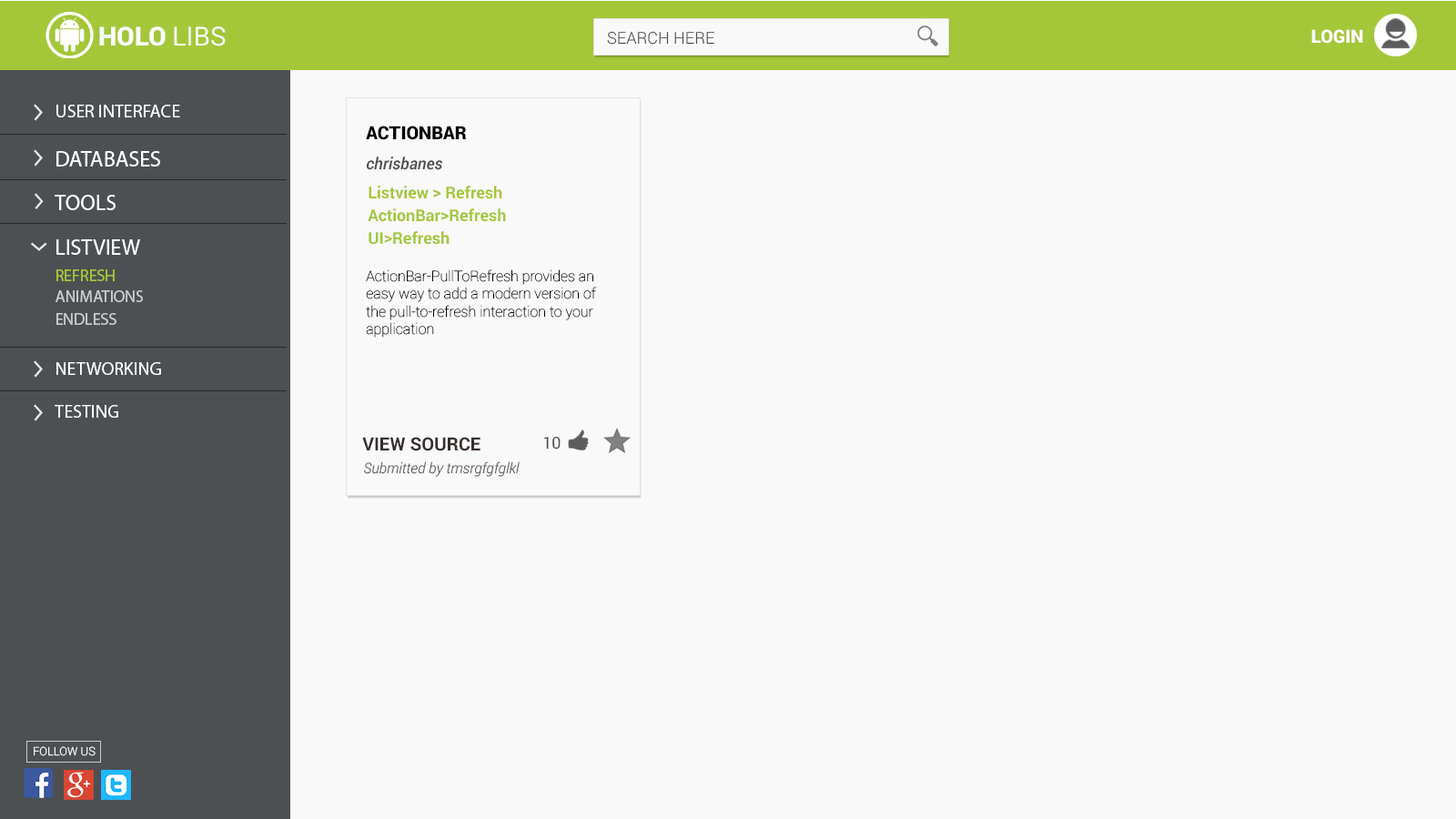
<style>
.page{position:relative;width:1456px;height:819px;background:#f9f9f9}
.page>*{position:absolute;margin:0}
.t1{font:26.1px "Roboto-Black";color:#f9f9f9}
.t2{font:26.1px "Roboto-Regular";color:#f9f9f9}
.t3{font:18.2px "Roboto-Black";color:#f9f9f9}
.t4{font:16.4px "Roboto-Light";color:#4d5052}
.t5{font:18.2px "MyriadPro-Regular";color:#ffffff}
.t6{font:18.2px "Roboto-Black";color:#000000}
.t7{font:21.8px "MyriadPro-Regular";color:#ffffff}
.t8{font:16.4px "Roboto-MediumItalic";color:#4d5052}
.t9{font:16.4px "Roboto-Bold";color:#a4c739}
.t10{font:16.4px "MyriadPro-Regular";color:#a4c739}
.t11{font:14.6px "Roboto-Thin";color:#000000}
.t12{font:16.4px "MyriadPro-Regular";color:#cccccc}
.t13{font:18.2px "Roboto-Bold";color:#362f2d}
.t14{font:16.4px "Roboto-Regular";color:#4d5052}
.t15{font:14.6px "Roboto-LightItalic";color:#4d5052}
.t16{font:11.6px "Roboto-Light";color:#f9f9f9}
</style>
<div class="page">
<p class="t1" style="left:99px;top:26px;width:127px;height:20px">HOLO <span class="t2">LIBS</span></p>
<p class="t3" style="left:1311px;top:29px;width:52px;height:15px">LOGIN</p>
<p class="t4" style="left:607px;top:31px;width:107px;height:14px">SEARCH HERE</p>
<p class="t5" style="left:56px;top:105px;width:124px;height:12px">USER INTERFACE</p>
<p class="t6" style="left:366px;top:126px;width:101px;height:14px">ACTIONBAR</p>
<p class="t7" style="left:56px;top:151px;width:104px;height:16px">DATABASES</p>
<p class="t8" style="left:366px;top:157px;width:77px;height:13px">chrisbanes</p>
<p class="t9" style="left:369px;top:186px;width:133px;height:13px">Listview &gt; Refresh</p>
<p class="t7" style="left:55px;top:195px;width:61px;height:15px">TOOLS</p>
<p class="t9" style="left:368px;top:208px;width:138px;height:14px">ActionBar&gt;Refresh</p>
<p class="t9" style="left:369px;top:231px;width:81px;height:14px">UI&gt;Refresh</p>
<p class="t7" style="left:56px;top:239px;width:84px;height:16px">LISTVIEW</p>
<p class="t10" style="left:56px;top:269px;width:59px;height:12px">REFRESH</p>
<p class="t11" style="left:366px;top:269px;width:231px;height:69px">ActionBar-PullToRefresh provides an easy way to add a modern version of the pull-to-refresh interaction to your application</p>
<p class="t12" style="left:56px;top:290px;width:87px;height:12px">ANIMATIONS</p>
<p class="t12" style="left:56px;top:313px;width:60px;height:12px">ENDLESS</p>
<p class="t5" style="left:56px;top:362px;width:105px;height:13px">NETWORKING</p>
<p class="t5" style="left:55px;top:405px;width:63px;height:13px">TESTING</p>
<p class="t13" style="left:362px;top:437px;width:118px;height:14px">VIEW SOURCE</p>
<p class="t14" style="left:544px;top:436px;width:17px;height:14px">10</p>
<p class="t15" style="left:364px;top:461px;width:156px;height:16px">Submitted by tmsrgfgfglkl</p>
<p class="t16" style="left:34px;top:746px;width:62px;height:10px">FOLLOW US</p>
</div>
